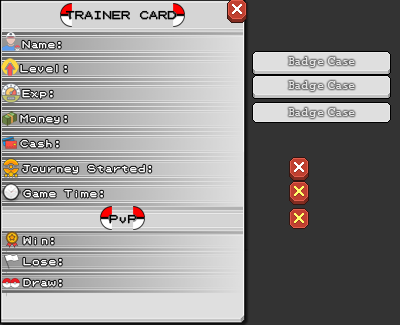
<style>
.page{position:relative;width:400px;height:325px;background:#333333}
.page>*{position:absolute;margin:0}
.t1{font:9px "PokemonGB";color:#000000;font-weight:bold}
.t2{font:8px "PokemonGB";color:#ffffff;font-weight:bold}
</style>
<div class="page">
<p class="t1" style="left:65px;top:10px;width:112px;height:10px">TRAINER CARD</p>
<p class="t2" style="left:22px;top:40px;width:39px;height:9px">Name:</p>
<p class="t2" style="left:20px;top:64px;width:47px;height:9px">Level:</p>
<p class="t2" style="left:22px;top:89px;width:31px;height:10px">Exp:</p>
<p class="t2" style="left:20px;top:114px;width:47px;height:10px">Money:</p>
<p class="t2" style="left:20px;top:139px;width:39px;height:9px">Cash:</p>
<p class="t2" style="left:22px;top:164px;width:130px;height:10px">Journey Started:</p>
<p class="t2" style="left:23px;top:189px;width:80px;height:9px">Game Time:</p>
<p class="t1" style="left:109px;top:214px;width:28px;height:10px">PvP</p>
<p class="t2" style="left:23px;top:236px;width:31px;height:9px">Win:</p>
<p class="t2" style="left:23px;top:257px;width:39px;height:9px">Lose:</p>
<p class="t2" style="left:23px;top:278px;width:39px;height:9px">Draw:</p>
</div>
